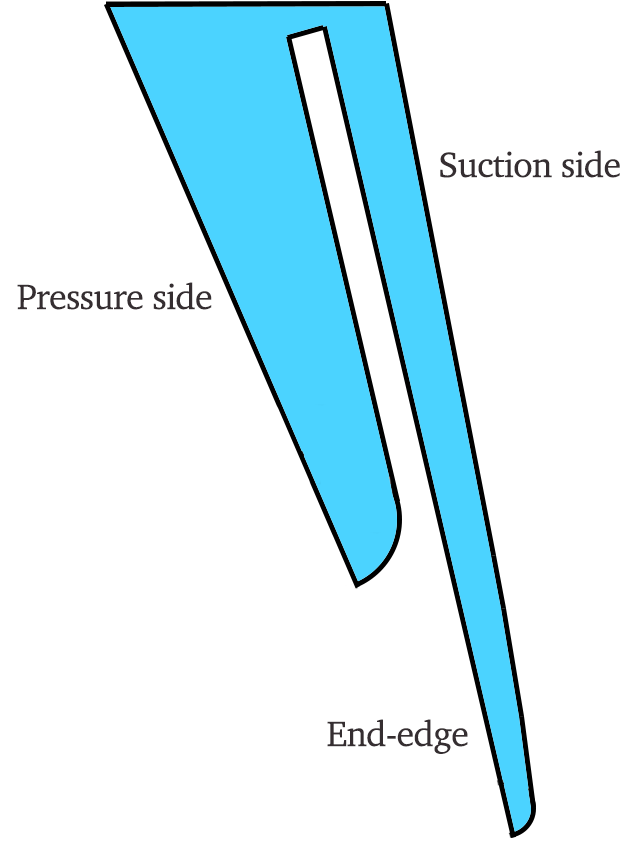
<style>
.page{position:relative;width:636px;height:848px;background:#ffffff}
.page>*{position:absolute;margin:0}
.t1{font:36px "Charter-Roman";letter-spacing:-0.02em;color:#352e31}
</style>
<div class="page">
<p class="t1" style="left:440px;top:150px;width:180px;height:28px">Suction side</p>
<p class="t1" style="left:17px;top:282px;width:195px;height:28px">Pressure side</p>
<p class="t1" style="left:327px;top:719px;width:141px;height:35px">End-edge</p>
</div>
